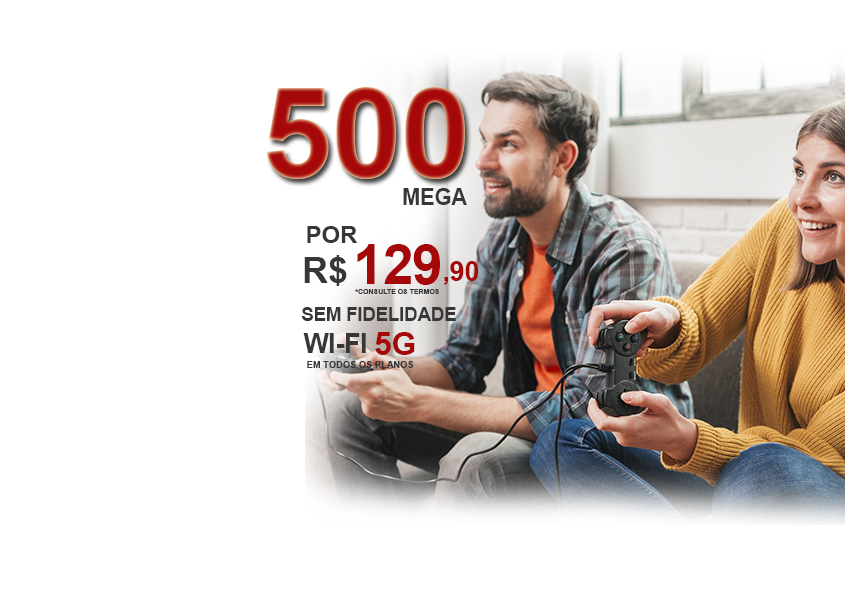
<style>
.page{position:relative;width:845px;height:600px;background:#ffffff}
.page>*{position:absolute;margin:0}
.t1{font:127.2px "Arial-BoldMT";letter-spacing:-0.01em;color:#a50808;text-transform:uppercase}
.t2{font:22.7px "Arial-BoldMT";letter-spacing:-0.01em;color:#373737;text-transform:uppercase;scale:0.97 1}
.t3{font:24.2px "Arial-BoldMT";letter-spacing:-0.01em;color:#373737;text-transform:uppercase}
.t4{font:54.7px "Arial-BoldMT";letter-spacing:-0.01em;color:#a50808;text-transform:uppercase}
.t5{font:35.6px "Arial-BoldMT";letter-spacing:-0.01em;color:#373737;text-transform:uppercase}
.t6{font:27.2px "Arial-BoldMT";letter-spacing:-0.01em;color:#a50808;text-transform:uppercase}
.t7{font:7.1px "Arial-BoldMT";letter-spacing:-0.01em;color:#373737;text-transform:uppercase}
.t8{font:18.8px "Arial-BoldMT";letter-spacing:-0.01em;color:#373737;text-transform:uppercase}
.t9{font:26.5px "Arial-BoldMT";letter-spacing:-0.01em;color:#373737;text-transform:uppercase}
.t10{font:31.6px "Arial-BoldMT";letter-spacing:-0.01em;color:#a50808;text-transform:uppercase}
.t11{font:9.5px "Arial-BoldMT";letter-spacing:-0.01em;color:#373737;text-transform:uppercase}
</style>
<div class="page">
<p class="t1" style="left:266px;top:87px;width:199px;height:92px">500</p>
<p class="t2" style="left:403px;top:188px;width:64px;height:17px">MEGA</p>
<p class="t3" style="left:307px;top:226px;width:50px;height:17px">por</p>
<p class="t4" style="left:357px;top:244px;width:83px;height:41px">129</p>
<p class="t5" style="left:304px;top:255px;width:43px;height:31px">R$</p>
<p class="t6" style="left:444px;top:261px;width:35px;height:24px">,90</p>
<p class="t7" style="left:355px;top:289px;width:84px;height:5px">*CONSULTE OS TERMOS</p>
<p class="t8" style="left:301px;top:307px;width:155px;height:14px">sem fidelidade</p>
<p class="t9" style="left:303px;top:333px;width:63px;height:20px">WI-FI</p>
<p class="t10" style="left:375px;top:332px;width:40px;height:23px">5G</p>
<p class="t11" style="left:307px;top:361px;width:107px;height:7px">em todos os planos</p>
</div>
